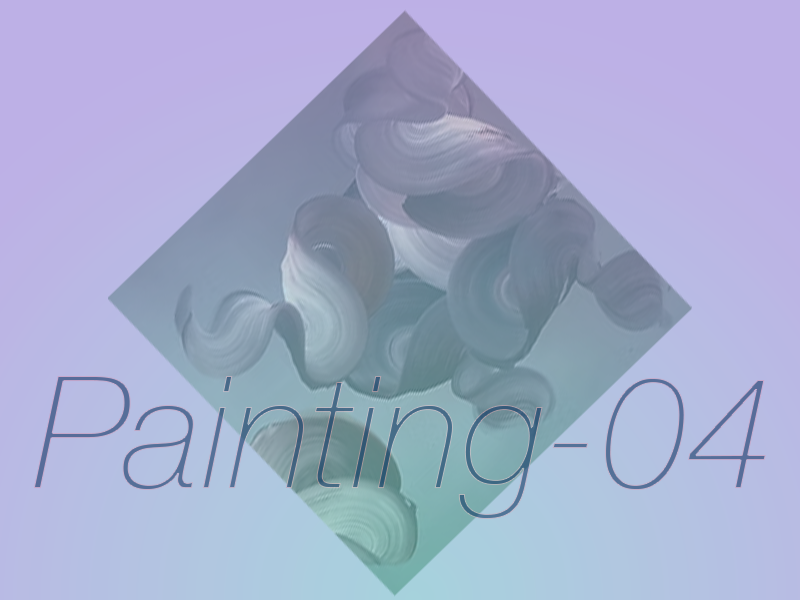
<style>
.page{position:relative;width:800px;height:600px}
.page>*{position:absolute;margin:0}
.t1{font:147.5px "HelveticaNeue-ThinItalic"}
</style>
<div class="page">
<p class="t1" style="left:34px;top:376px;width:732px;height:143px">Painting-04</p>
</div>
